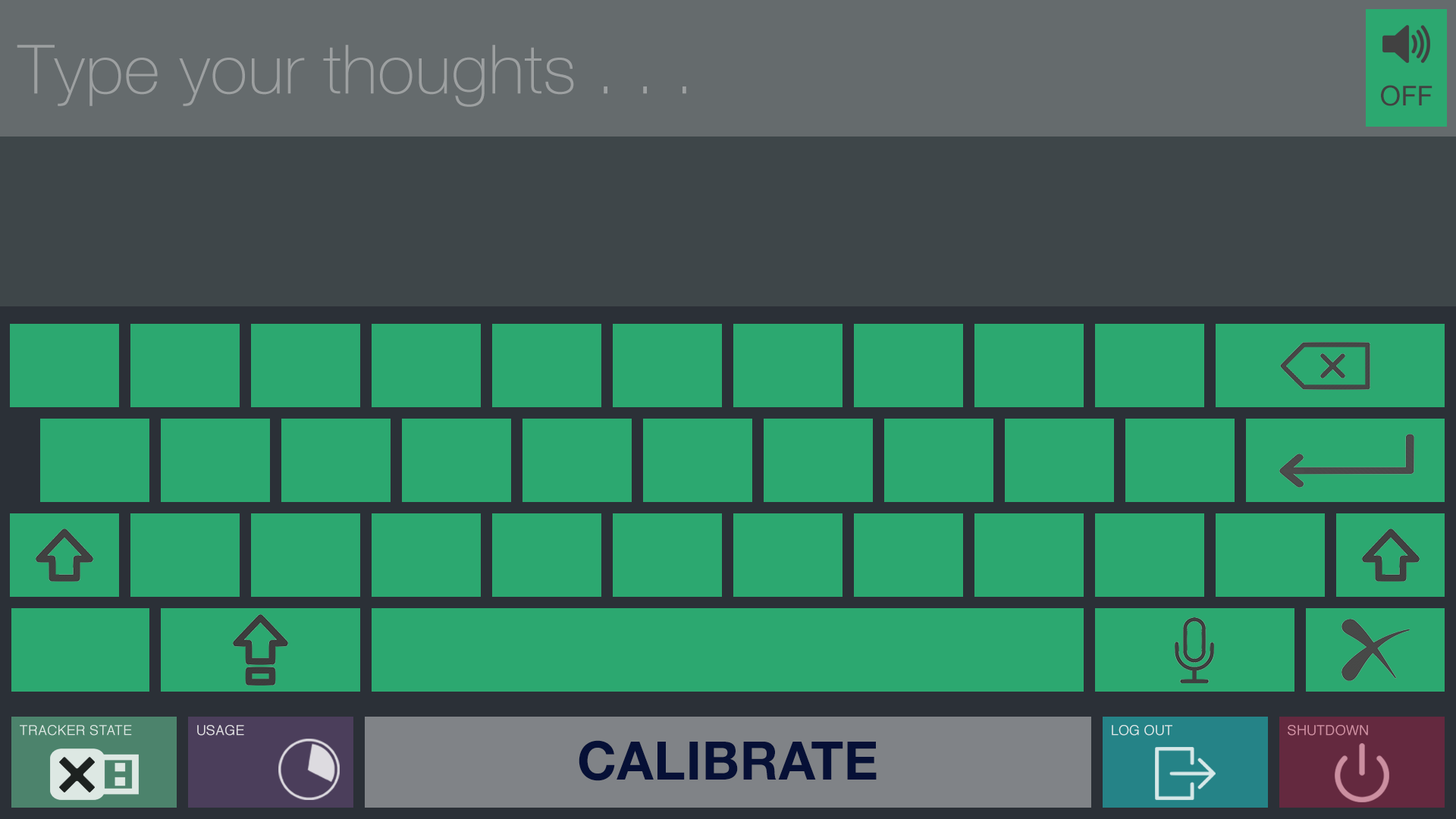
<style>
.page{position:relative;width:1456px;height:819px;background:#2ca870}
.page>*{position:absolute;margin:0}
.t1{font:68.2px "HelveNueThin";letter-spacing:0.01em;color:#9da0a1}
.t2{font:27.3px "HelveticaNeue";letter-spacing:0.01em;color:#414141}
.t3{font:13.6px "Helvetica";letter-spacing:0.01em;color:#e1dfe3}
.t4{font:13.6px "Helvetica";letter-spacing:0.01em;color:#dceaea}
.t5{font:13.6px "Helvetica";letter-spacing:0.01em;color:#cf91a3}
.t6{font:53.1px "HelveticaNeue-Bold";letter-spacing:0.01em;color:#061036}
</style>
<div class="page">
<p class="t1" style="left:17px;top:45px;width:669px;height:62px">Type your thoughts . . .</p>
<p class="t2" style="left:1381px;top:85px;width:51px;height:21px">OFF</p>
<p class="t3" style="left:197px;top:725px;width:47px;height:11px">USAGE</p>
<p class="t4" style="left:1112px;top:725px;width:60px;height:11px">LOG OUT</p>
<p class="t5" style="left:1288px;top:725px;width:80px;height:11px">SHUTDOWN</p>
<p class="t6" style="left:579px;top:740px;width:298px;height:41px">CALIBRATE</p>
</div>
